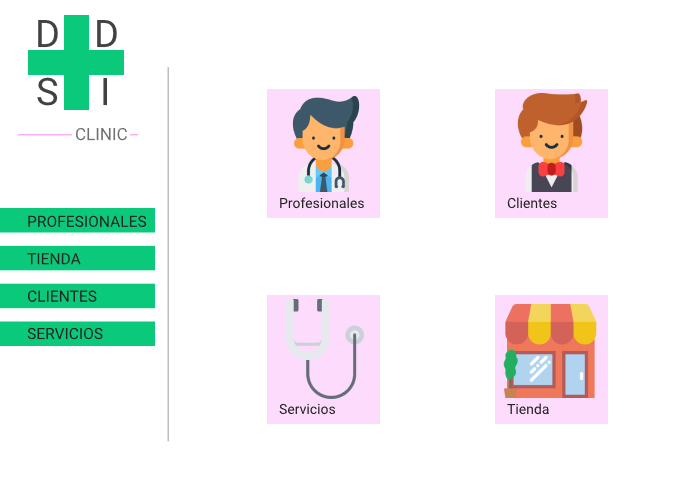
<style>
.page{position:relative;width:700px;height:500px;background:#ffffff}
.page>*{position:absolute;margin:0}
.t1{font:14px "Roboto-Regular";color:#252525}
.t2{font:15.6px "Roboto-Regular";color:#252525}
</style>
<div class="page">
<p class="t1" style="left:280px;top:197px;width:84px;height:12px">Profesionales</p>
<p class="t1" style="left:507px;top:197px;width:50px;height:12px">Clientes</p>
<p class="t2" style="left:27px;top:215px;width:120px;height:125px">PROFESIONALES<br><br>TIENDA<br><br>CLIENTES<br><br>SERVICIOS</p>
<p class="t1" style="left:279px;top:403px;width:56px;height:12px">Servicios</p>
<p class="t1" style="left:507px;top:403px;width:42px;height:12px">Tienda</p>
</div>
